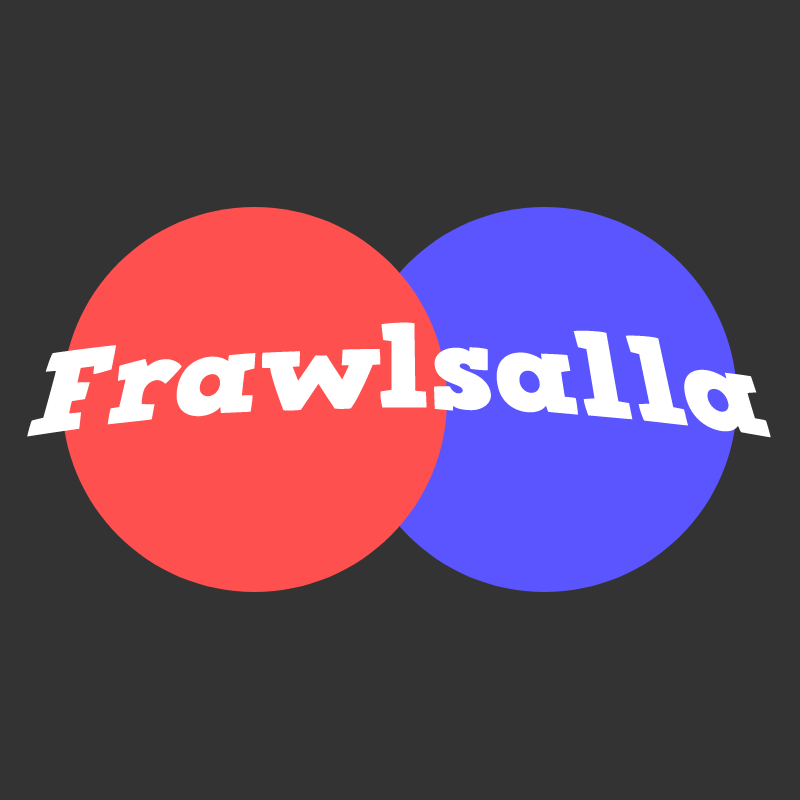
<style>
.page{position:relative;width:800px;height:800px;background:#333333}
.page>*{position:absolute;margin:0}
.t1{font:120px "HVDComicSerifPro";color:#ffffff}
</style>
<div class="page">
<p class="t1" style="left:27px;top:322px;width:745px;height:116px">Frawlsalla</p>
</div>
